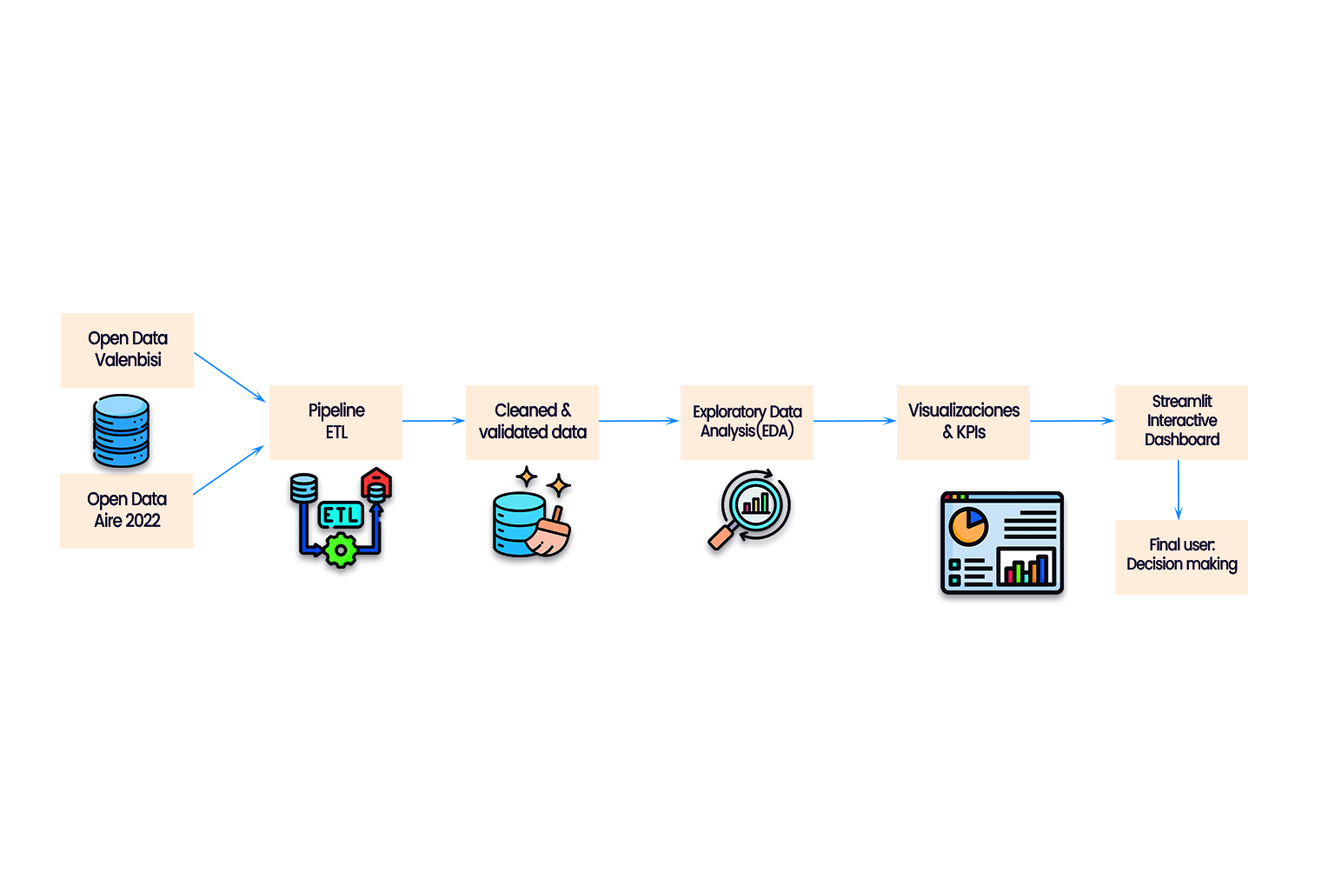
<style>
.page{position:relative;width:1335px;height:893px;background:#ffffff}
.page>*{position:absolute;margin:0}
.t1{font:18.6px/21.1px "Poppins-Medium";letter-spacing:-0.06em;color:#090826;scale:0.87 1}
.t2{font:16.9px/19.2px "Poppins-Medium";letter-spacing:-0.06em;color:#090826;scale:0.87 1}
</style>
<div class="page">
<p class="t1" style="left:88px;top:330px;width:80px;height:37px;text-align:center">Open Data<br>Valenbisi</p>
<p class="t1" style="left:310px;top:402px;width:55px;height:37px;text-align:center">Pipeline<br>ETL</p>
<p class="t1" style="left:909px;top:402px;width:112px;height:37px;text-align:center">Visualizaciones<br>&amp; KPIs</p>
<p class="t2" style="left:1146px;top:394px;width:74px;height:52px;text-align:center">Streamlit<br>Interactive<br>Dashboard</p>
<p class="t1" style="left:479px;top:403px;width:108px;height:36px;text-align:center">Cleaned &amp;<br>validated data</p>
<p class="t2" style="left:694px;top:404px;width:108px;height:38px;text-align:center">Exploratory Data<br>Analysis(EDA)</p>
<p class="t1" style="left:87px;top:491px;width:80px;height:37px;text-align:center">Open Data<br>Aire 2022</p>
<p class="t2" style="left:1128px;top:536px;width:110px;height:39px;text-align:center">Final user:<br>Decision making</p>
</div>
